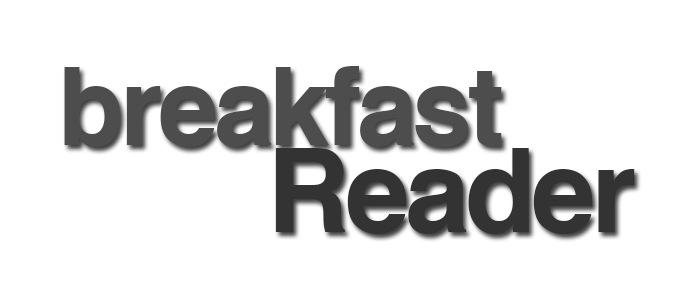
<style>
.page{position:relative;width:700px;height:300px;background:#ffffff}
.page>*{position:absolute;margin:0}
.t1{font:108px "Helvetica-Bold";letter-spacing:-0.04em;color:#4d4d4d}
.t2{font:116px "Helvetica-Bold";letter-spacing:-0.04em;color:#333333}
</style>
<div class="page">
<p class="t1" style="left:64px;top:66px;width:438px;height:81px">breakfast</p>
<p class="t2" style="left:275px;top:148px;width:360px;height:86px">Reader</p>
</div>
